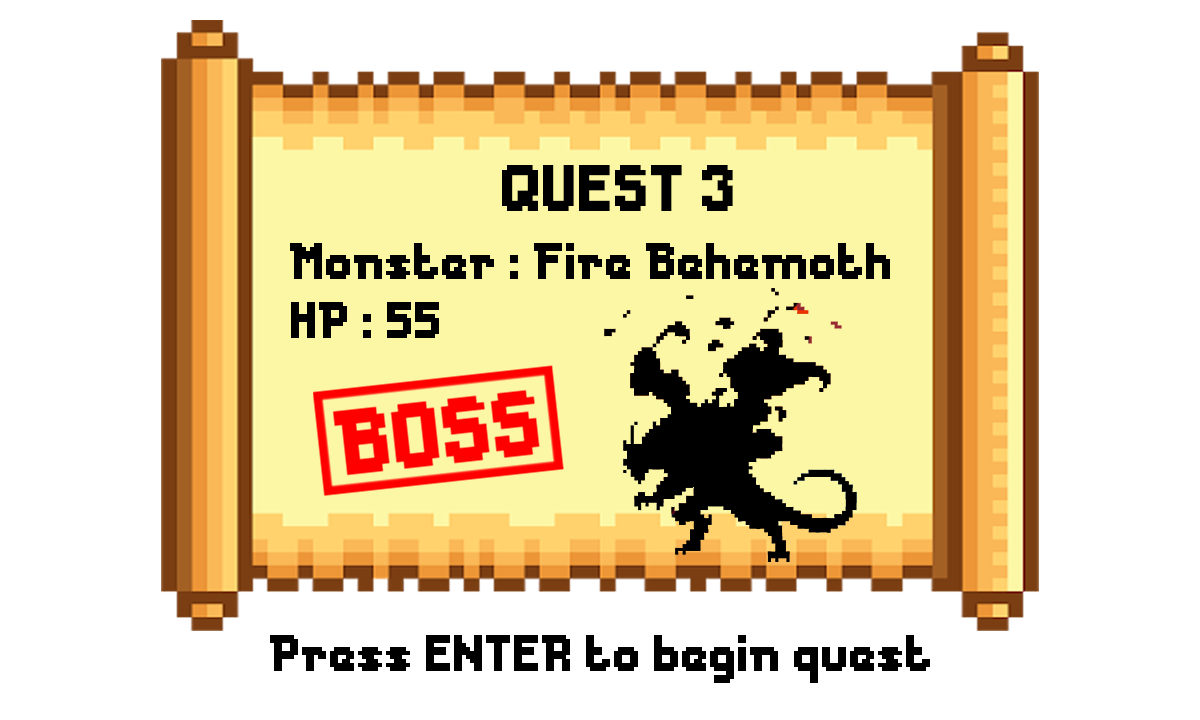
<style>
.page{position:relative;width:1200px;height:720px;background:#ffffff}
.page>*{position:absolute;margin:0}
.t1{font:61.3px "Messe-Duesseldorf";color:#000000}
.t2{font:48px "Messe-Duesseldorf";color:#000000}
</style>
<div class="page">
<p class="t1" style="left:502px;top:165px;width:231px;height:46px">QUEST 3</p>
<p class="t2" style="left:290px;top:243px;width:600px;height:36px">Monster : Fire Behemoth</p>
<p class="t2" style="left:291px;top:302px;width:148px;height:36px">HP : 55</p>
<p class="t2" style="left:270px;top:635px;width:660px;height:48px">Press ENTER to begin quest</p>
</div>
